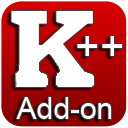
<style>
.page{position:relative;width:128px;height:128px;background:#ffffff}
.page>*{position:absolute;margin:0}
.t1{font:42px "ArialMT";color:#ffffff}
.t2{font:30px "ArialMT";color:#ffffff}
</style>
<div class="page">
<p class="t1" style="left:77px;top:36px;width:46px;height:20px">++</p>
<p class="t2" style="left:16px;top:97px;width:96px;height:22px">Add-on</p>
</div>
